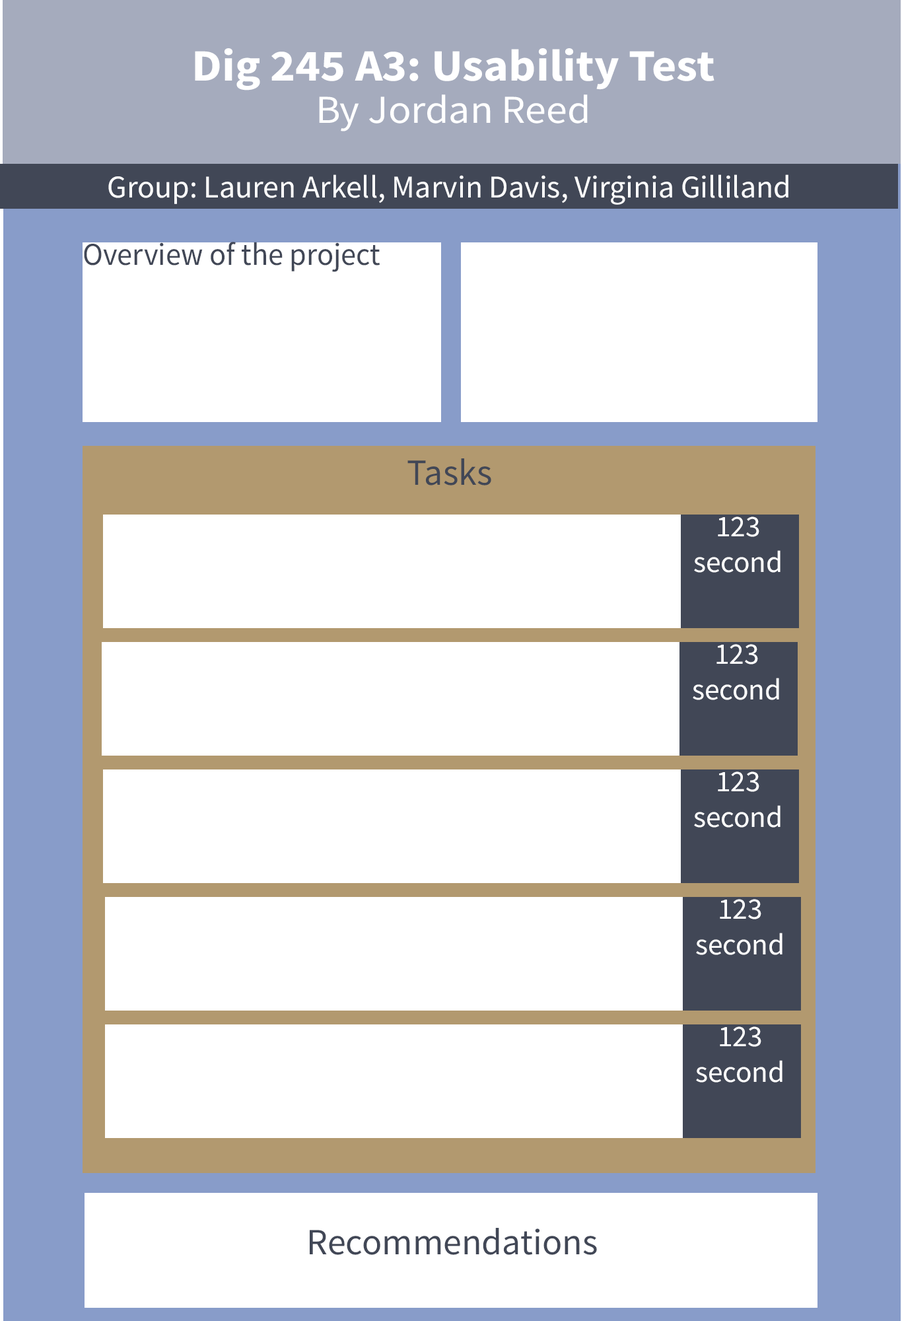
<style>
.page{position:relative;width:902px;height:1321px;background:#ffffff}
.page>*{position:absolute;margin:0}
.t1{font:44.8px "SourceSansRoman-Bold";color:#ffffff;scale:1.07 1}
.t2{font:39.6px "SourceSansRoman-Regular";color:#ffffff;scale:1.07 1}
.t3{font:31.7px "SourceSansRoman-Regular";color:#ffffff}
.t4{font:31.7px "SourceSansRoman-Regular";color:#414756;scale:0.97 1}
.t5{font:37px "SourceSansRoman-Regular";color:#414756}
.t6{font:29.9px "SourceSansRoman-Regular";color:#ffffff}
</style>
<div class="page">
<p class="t1" style="left:195px;top:48px;width:520px;height:43px;text-align:center">Dig 245 A3: Usability Test<br><br><br>by</p>
<p class="t2" style="left:319px;top:94px;width:269px;height:37px;text-align:center">By Jordan Reed<br><br><span class="t1"><br><br>by</span></p>
<p class="t3" style="left:108px;top:174px;width:681px;height:31px">Group: Lauren Arkell, Marvin Davis, Virginia Gilliland</p>
<p class="t4" style="left:84px;top:242px;width:296px;height:30px">Overview of the project</p>
<p class="t5" style="left:408px;top:458px;width:84px;height:28px">Tasks</p>
<p class="t6" style="left:694px;top:517px;width:87px;height:56px;text-align:center">123 second</p>
<p class="t6" style="left:693px;top:644px;width:87px;height:56px;text-align:center">123 second</p>
<p class="t6" style="left:694px;top:772px;width:87px;height:56px;text-align:center">123 second</p>
<p class="t6" style="left:696px;top:899px;width:87px;height:56px;text-align:center">123 second</p>
<p class="t6" style="left:696px;top:1027px;width:87px;height:56px;text-align:center">123 second</p>
<p class="t5" style="left:310px;top:1228px;width:287px;height:27px">Recommendations</p>
</div>
